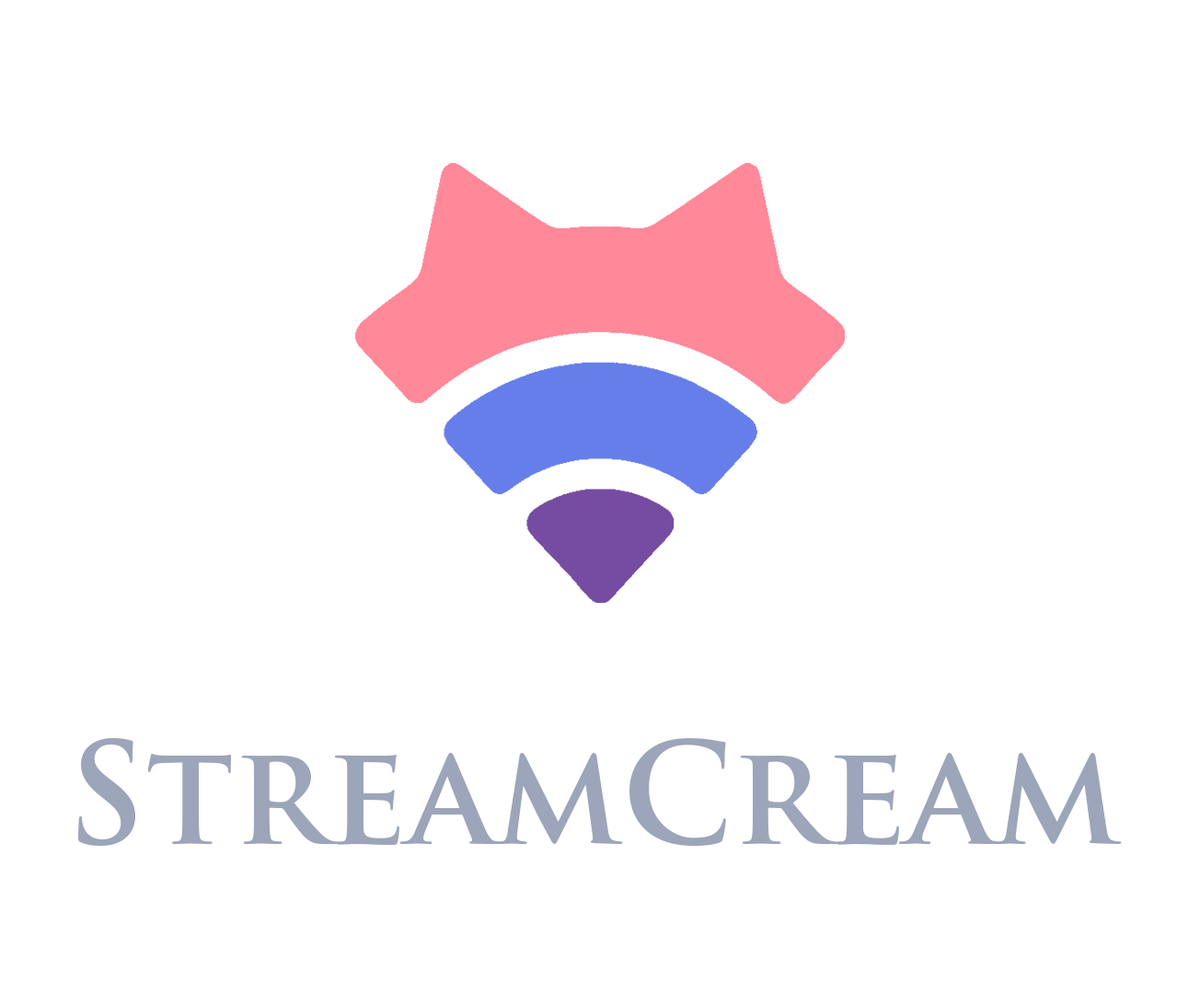
<style>
.page{position:relative;width:1200px;height:994px;background:#ffffff}
.page>*{position:absolute;margin:0}
.t1{font:138px "TrajanPro-Bold";color:#9ca5b9}
</style>
<div class="page">
<p class="t1" style="left:78px;top:737px;width:1044px;height:109px">StreamCream</p>
</div>
